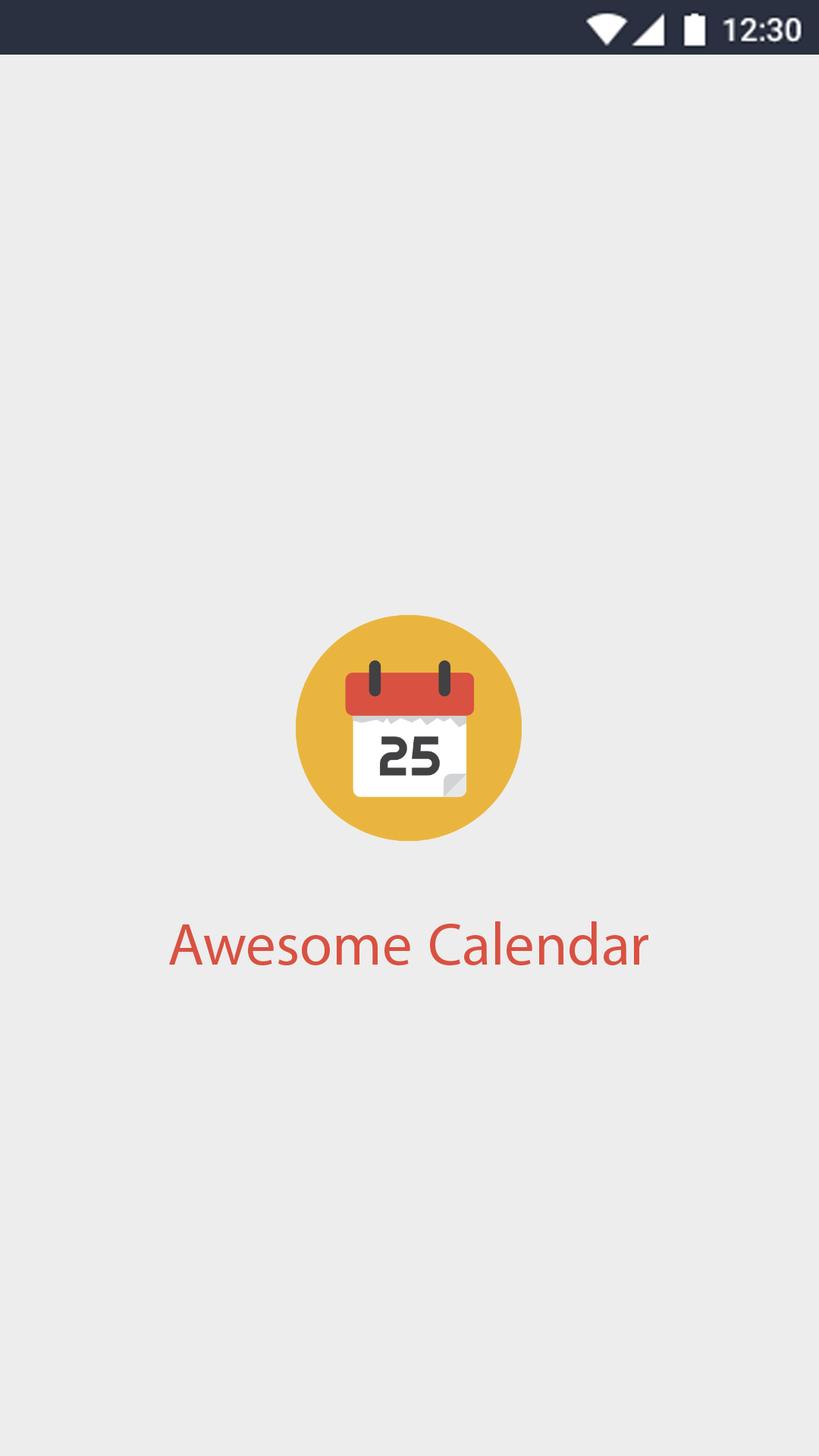
<style>
.page{position:relative;width:819px;height:1456px;background:#ededed}
.page>*{position:absolute;margin:0}
.t1{font:83.4px "MyriadArabic-Regular";color:#d95141}
</style>
<div class="page">
<p class="t1" style="left:169px;top:921px;width:479px;height:45px">Awesome Calendar</p>
</div>
